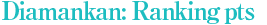
<style>
.page{position:relative;width:267px;height:25px;background:#ffffff}
.page>*{position:absolute;margin:0}
.t1{font:25px "RyuminPro-ExBold";letter-spacing:-0.08em;color:#1cbdc0}
</style>
<div class="page">
<p class="t1" style="left:2px;top:1px;width:253px;height:23px">Diamankan: Ranking pts</p>
</div>
